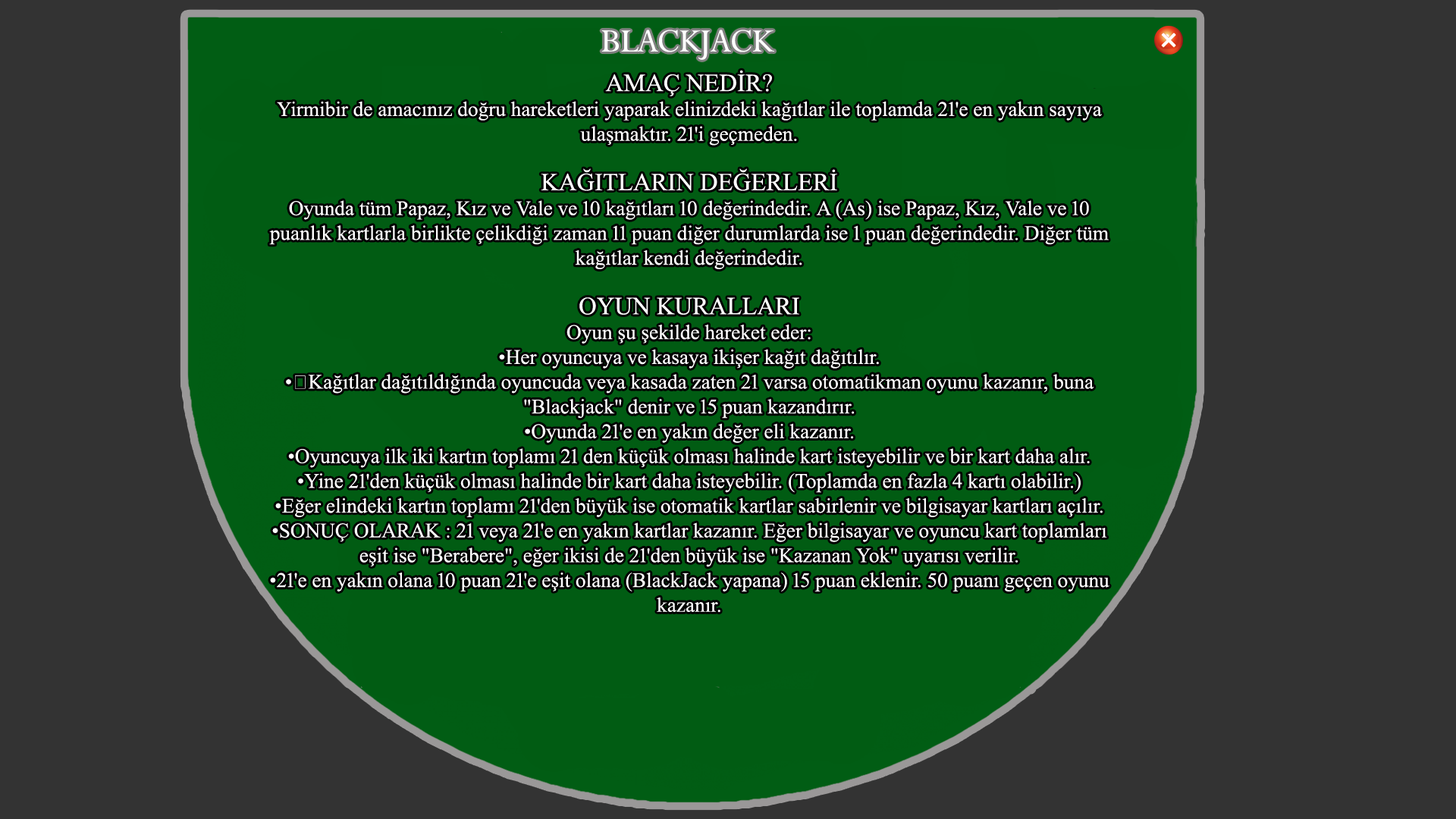
<style>
.page{position:relative;width:1456px;height:819px;background:#333333}
.page>*{position:absolute;margin:0}
.t1{font:36.4px "00216";color:#ffffff}
.t2{font:20.7px/24.8px "TimesNewRomanPSMT";color:#ffffff}
.t3{font:24.8px/24.8px "TimesNewRomanPSMT";color:#ffffff}
</style>
<div class="page">
<p class="t1" style="left:601px;top:30px;width:173px;height:30px">BLACKJACK</p>
<p class="t2" style="left:269px;top:70px;width:840px;height:543px;text-align:center"><span class="t3">AMAÇ NEDİR?<br></span>Yirmibir de amacınız doğru hareketleri yaparak elinizdeki kağıtlar ile toplamda 21'e en yakın sayıya ulaşmaktır. 21'i geçmeden.<br><br><span class="t3">KAĞITLARIN DEĞERLERİ<br></span>Oyunda tüm Papaz, Kız ve Vale ve 10 kağıtları 10 değerindedir. A (As) ise Papaz, Kız, Vale ve 10 puanlık kartlarla birlikte çelikdiği zaman 11 puan diğer durumlarda ise 1 puan değerindedir. Diğer tüm kağıtlar kendi değerindedir.<br><br><span class="t3">OYUN KURALLARI<br></span>Oyun şu şekilde hareket eder:<br>•Her oyuncuya ve kasaya ikişer kağıt dağıtılır.<br>• Kağıtlar dağıtıldığında oyuncuda veya kasada zaten 21 varsa otomatikman oyunu kazanır, buna "Blackjack" denir ve 15 puan kazandırır. <br>•Oyunda 21'e en yakın değer eli kazanır. <br>•Oyuncuya ilk iki kartın toplamı 21 den küçük olması halinde kart isteyebilir ve bir kart daha alır. <br>•Yine 21'den küçük olması halinde bir kart daha isteyebilir. (Toplamda en fazla 4 kartı olabilir.)<br>•Eğer elindeki kartın toplamı 21'den büyük ise otomatik kartlar sabirlenir ve bilgisayar kartları açılır. <br>•SONUÇ OLARAK : 21 veya 21'e en yakın kartlar kazanır. Eğer bilgisayar ve oyuncu kart toplamları eşit ise "Berabere", eğer ikisi de 21'den büyük ise "Kazanan Yok" uyarısı verilir. <br>•21'e en yakın olana 10 puan 21'e eşit olana (BlackJack yapana) 15 puan eklenir. 50 puanı geçen oyunu kazanır.</p>
</div>
